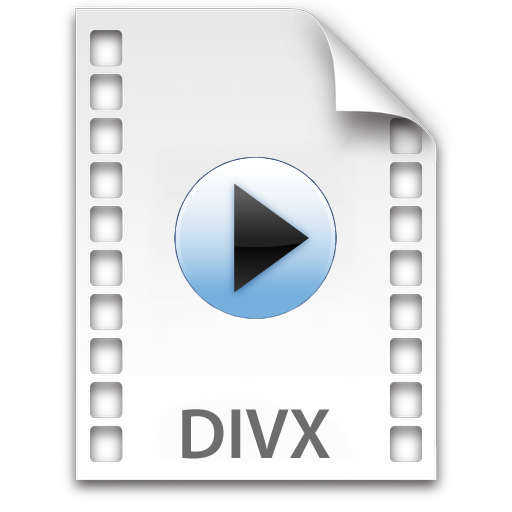
<style>
.page{position:relative;width:512px;height:512px;background:#ffffff}
.page>*{position:absolute;margin:0}
.t1{font:72px "MyriadPro-Semibold";color:#6e6d6d}
</style>
<div class="page">
<p class="t1" style="left:182px;top:409px;width:148px;height:50px">DIVX</p>
</div>
